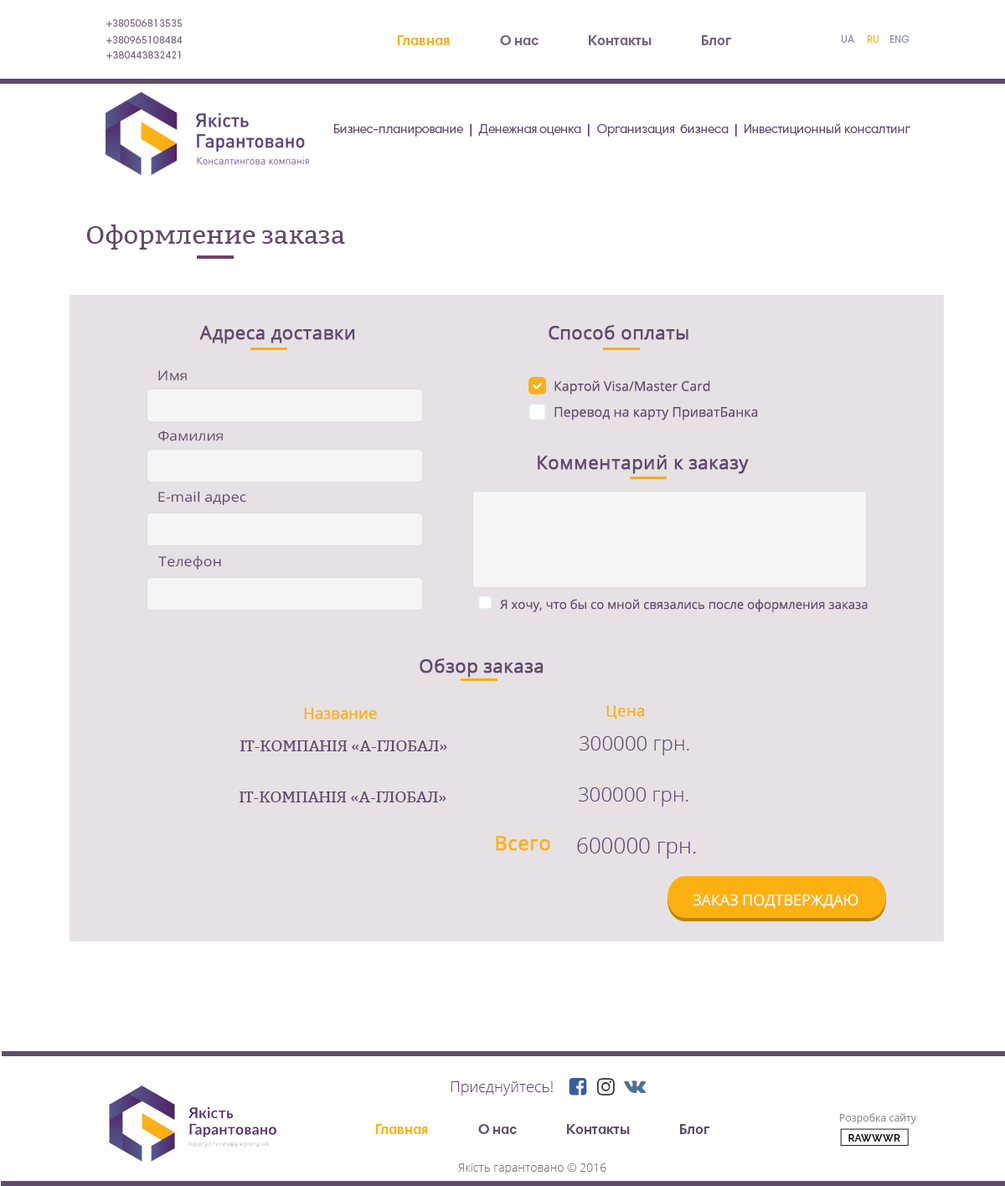
<style>
.page{position:relative;width:1005px;height:1186px;background:#ffffff}
.page>*{position:absolute;margin:0}
.t1{font:10.1px "HarmoniaSansProCyr-Regular";color:#806f89}
.t2{font:14.2px "HarmoniaSansProCyr-Bold";color:#fdaf19}
.t3{font:14.2px "HarmoniaSansProCyr-Bold";color:#604b6c}
.t4{font:10.1px "HarmoniaSansProCyr-Regular";color:#858eb3}
.t5{font:10.1px "HarmoniaSansProCyr-Regular";color:#fdaf19}
.t6{font:12.8px "HarmoniaSansProCyr-Regular";letter-spacing:-0.025em;color:#604b6c}
.t7{font:12.8px "HarmoniaSansProCyr-Bold";color:#533774}
.t8{font:12.8px "HarmoniaSansProCyr-Regular";letter-spacing:-0.017em;color:#604a6e}
.t9{font:25.1px "Bitter-Regular";color:#604b6c;scale:1.04 1}
.t10{font:18.4px "OpenSans";color:#604b6c;font-weight:bold}
.t11{font:13.4px "OpenSans";color:#604b6c;scale:1.1 1}
.t12{font:13.4px/25.8px "OpenSans";color:#604b6c}
.t13{font:12.6px "OpenSans";color:#604b6c}
.t14{font:15.1px "OpenSans";color:#fdb111;font-weight:bold}
.t15{font:20.1px "OpenSans-Light";color:#604b6c}
.t16{font:15.1px "Bitter-Regular";color:#604b6c;scale:1.04 1}
.t17{font:20.1px "OpenSans";color:#fdb111;font-weight:bold}
.t18{font:21.8px "OpenSans-Light";color:#604b6c}
.t19{font:15.1px "OpenSans";color:#ffffff;text-transform:uppercase}
.t20{font:15.1px "OpenSans-Light";color:#604b6c}
.t21{font:10.4px "OpenSans";color:#8a8a8b}
.t22{font:14.2px "HarmoniaSansProCyr-Bold";color:#fdb111}
.t23{font:10.4px "Raleway-Bold";color:#07080c}
.t24{font:11.7px "OpenSans-Light";color:#787878}
</style>
<div class="page">
<p class="t1" style="left:106px;top:19px;width:77px;height:8px">+380506813535</p>
<p class="t1" style="left:106px;top:36px;width:77px;height:8px">+380965108484</p>
<p class="t2" style="left:398px;top:35px;width:52px;height:10px">Главная</p>
<p class="t3" style="left:500px;top:35px;width:39px;height:10px">О нас</p>
<p class="t3" style="left:589px;top:35px;width:63px;height:10px">Контакты</p>
<p class="t3" style="left:702px;top:35px;width:29px;height:10px">Блог</p>
<p class="t4" style="left:842px;top:35px;width:37px;height:8px">UA    <span class="t5"> RU</span></p>
<p class="t4" style="left:890px;top:35px;width:20px;height:8px">ENG</p>
<p class="t1" style="left:106px;top:51px;width:75px;height:8px">+380443832421</p>
<p class="t6" style="left:334px;top:124px;width:129px;height:13px">Бизнес-планирование</p>
<p class="t7" style="left:470px;top:124px;width:2px;height:13px">|</p>
<p class="t8" style="left:478px;top:124px;width:103px;height:12px">Денежная оценка</p>
<p class="t7" style="left:588px;top:124px;width:2px;height:13px">|</p>
<p class="t8" style="left:597px;top:124px;width:132px;height:13px">Организация  бизнеса</p>
<p class="t7" style="left:736px;top:124px;width:1px;height:13px">|</p>
<p class="t8" style="left:745px;top:123px;width:166px;height:13px">Инвестиционный консалтинг</p>
<p class="t9" style="left:86px;top:225px;width:259px;height:25px">Оформление заказа</p>
<p class="t10" style="left:199px;top:326px;width:156px;height:18px">Адреса доставки</p>
<p class="t10" style="left:549px;top:325px;width:140px;height:15px">Способ оплаты</p>
<p class="t11" style="left:158px;top:370px;width:29px;height:11px">Имя</p>
<p class="t12" style="left:555px;top:380px;width:203px;height:41px">Картой Visa/Master Card<br>Перевод на карту ПриватБанка</p>
<p class="t11" style="left:158px;top:431px;width:65px;height:10px">Фамилия</p>
<p class="t10" style="left:538px;top:455px;width:211px;height:19px">Комментарий к заказу</p>
<p class="t11" style="left:158px;top:491px;width:88px;height:14px">E-mail адрес</p>
<p class="t11" style="left:158px;top:555px;width:63px;height:15px">Телефон</p>
<p class="t13" style="left:500px;top:599px;width:368px;height:13px">Я хочу, что бы со мной связались после оформления заказа</p>
<p class="t10" style="left:420px;top:658px;width:124px;height:20px">Обзор заказа</p>
<p class="t14" style="left:304px;top:708px;width:73px;height:12px">Название</p>
<p class="t14" style="left:607px;top:705px;width:38px;height:15px">Цена</p>
<p class="t15" style="left:580px;top:736px;width:109px;height:20px">300000 грн.</p>
<p class="t16" style="left:240px;top:741px;width:207px;height:10px">ІТ-КОМПАНІЯ «А-ГЛОБАЛ»</p>
<p class="t16" style="left:240px;top:792px;width:207px;height:11px">ІТ-КОМПАНІЯ «А-ГЛОБАЛ»</p>
<p class="t15" style="left:579px;top:787px;width:110px;height:20px">300000 грн.</p>
<p class="t17" style="left:496px;top:836px;width:54px;height:15px">Всего</p>
<p class="t18" style="left:577px;top:838px;width:119px;height:21px">600000 грн.</p>
<p class="t19" style="left:694px;top:894px;width:165px;height:15px">Заказ Подтверждаю</p>
<p class="t20" style="left:451px;top:1081px;width:102px;height:15px">Приєднуйтесь!</p>
<p class="t21" style="left:839px;top:1113px;width:77px;height:12px">Розробка сайту</p>
<p class="t22" style="left:376px;top:1124px;width:52px;height:10px">Главная</p>
<p class="t3" style="left:478px;top:1124px;width:39px;height:10px">О нас</p>
<p class="t3" style="left:567px;top:1124px;width:63px;height:10px">Контакты</p>
<p class="t3" style="left:680px;top:1124px;width:30px;height:10px">Блог</p>
<p class="t23" style="left:849px;top:1134px;width:52px;height:8px">RAWWWR</p>
<p class="t24" style="left:458px;top:1164px;width:149px;height:10px">Якість гарантовано © 2016</p>
</div>
